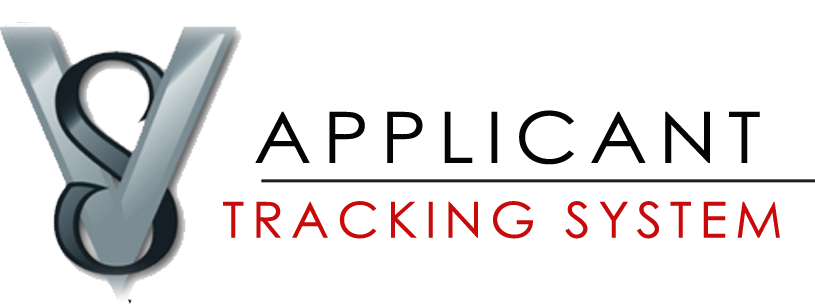
<style>
.page{position:relative;width:815px;height:304px;background:#ffffff}
.page>*{position:absolute;margin:0}
.t1{font:71.1px "CenturyGothic";letter-spacing:0.12em;color:#060303;font-weight:bold;scale:1.1 1}
.t2{font:49.3px "CenturyGothic";letter-spacing:0.12em;color:#c90a0a;font-weight:bold;scale:1.05 1}
</style>
<div class="page">
<p class="t1" style="left:255px;top:110px;width:505px;height:55px">APPLICANT</p>
<p class="t2" style="left:223px;top:201px;width:557px;height:38px">TRACKING SYSTEM</p>
</div>
